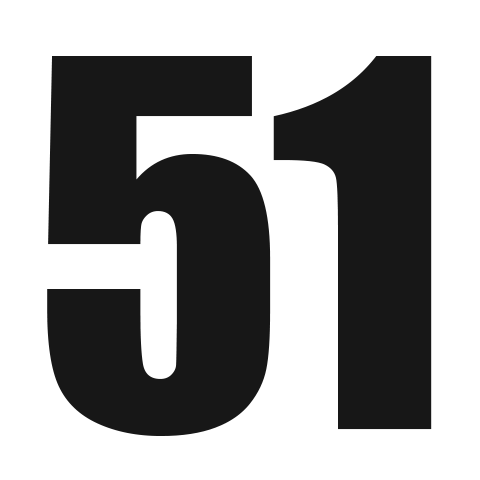
<style>
.page{position:relative;width:480px;height:480px;background:#ffffff}
.page>*{position:absolute;margin:0}
.t1{font:472.3px "Impact";color:#171717}
</style>
<div class="page">
<p class="t1" style="left:47px;top:56px;width:385px;height:380px">51</p>
</div>
